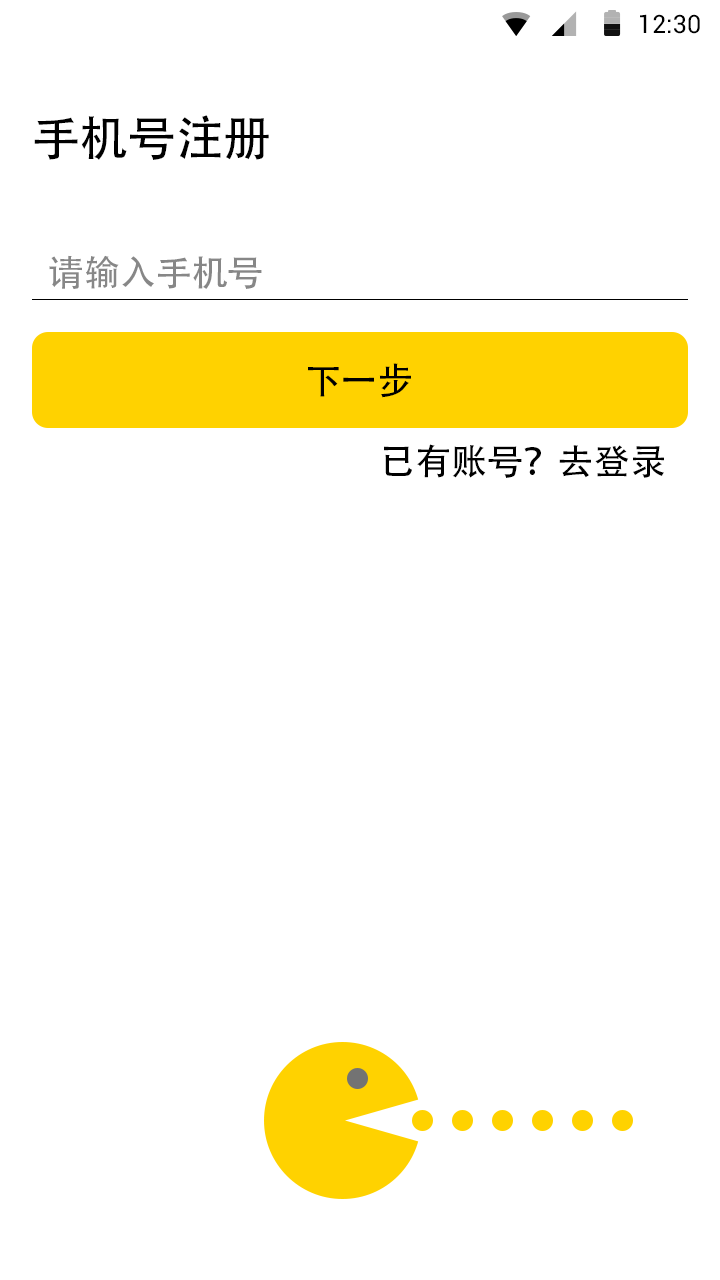
<style>
.page{position:relative;width:720px;height:1280px;background:#ffffff}
.page>*{position:absolute;margin:0}
.t1{font:25.4px "Roboto-Regular";color:#000000}
.t2{font:48px "AdobeHeitiStd-Regular";letter-spacing:-0.004em;color:#000000}
.t3{font:36px "AdobeHeitiStd-Regular";letter-spacing:-0.004em;color:#878787}
.t4{font:36px "AdobeHeitiStd-Regular";letter-spacing:-0.004em;color:#000000}
</style>
<div class="page">
<p class="t1" style="left:640px;top:14px;width:60px;height:20px">12:30</p>
<p class="t2" style="left:34px;top:115px;width:235px;height:45px">手机号注册</p>
<p class="t3" style="left:49px;top:255px;width:213px;height:34px">请输入手机号</p>
<p class="t4" style="left:308px;top:363px;width:103px;height:35px">下一步</p>
<p class="t4" style="left:384px;top:444px;width:280px;height:34px">已有账号？去登录</p>
</div>
